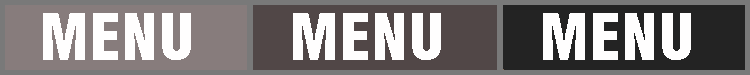
<style>
.page{position:relative;width:750px;height:75px;background:#fffefe}
.page>*{position:absolute;margin:0}
.t1{font:62.1px "Swiss721BT-BlackCondensed";color:#fffefe}
</style>
<div class="page">
<p class="t1" style="left:43px;top:13px;width:148px;height:47px">MENU</p>
<p class="t1" style="left:293px;top:13px;width:148px;height:47px">MENU</p>
<p class="t1" style="left:543px;top:13px;width:148px;height:47px">MENU</p>
</div>
